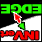
<style>
.page{position:relative;width:42px;height:42px;background:#000000}
.page>*{position:absolute;margin:0}
.t1{font:12.8px "Arial-Black";letter-spacing:-0.075em;color:#24ff00;scale:1.17 1}
.t2{font:11.2px "Arial-Black";letter-spacing:-0.075em;color:#ff0000;scale:1.25 1}
.t3{font:8px "Arial-Black";letter-spacing:-0.075em;color:#ff0000;scale:1.25 1}
</style>
<div class="page">
<p class="t1" style="left:0px;top:4px;width:42px;height:10px;rotate:-180deg">EDGE</p>
<p class="t2" style="left:0px;top:31px;width:39px;height:9px;rotate:-180deg">INV<span class="t3">ert</span></p>
</div>
